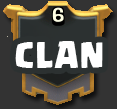
<style>
.page{position:relative;width:117px;height:109px;background:#333333}
.page>*{position:absolute;margin:0}
.t1{font:28.7px "Supercell-Magic";letter-spacing:0.08em;color:#ffffff;scale:0.8 1}
</style>
<div class="page">
<p class="t1" style="left:15px;top:41px;width:88px;height:27px">CLAN</p>
</div>
